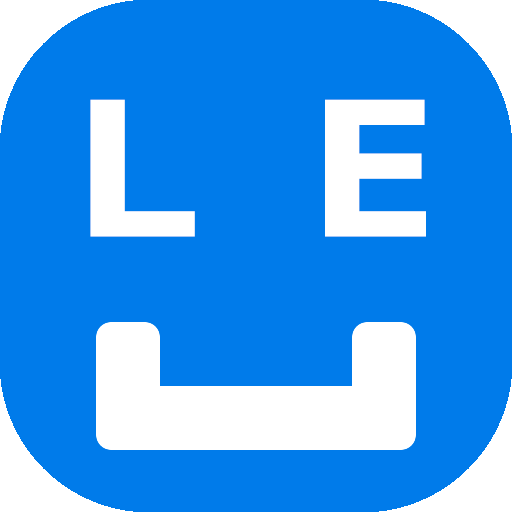
<style>
.page{position:relative;width:512px;height:512px;background:#007bea}
.page>*{position:absolute;margin:0}
.t1{font:200px "GillSansMT-Bold";color:#ffffff}
</style>
<div class="page">
<p class="t1" style="left:90px;top:99px;width:336px;height:138px">L  E</p>
</div>
